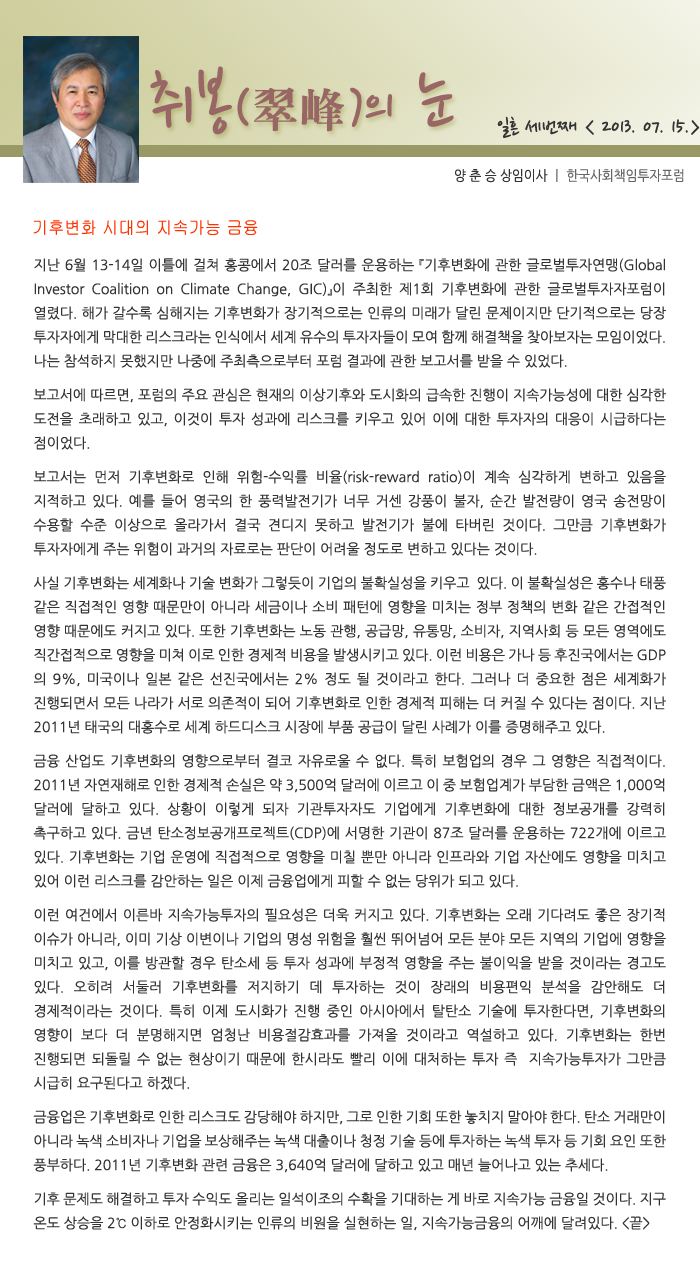
<style>
.page{position:relative;width:700px;height:1276px;background:#ffffff}
.page>*{position:absolute;margin:0}
.t1{font:77.5px "NanumPen";color:#996666}
.t2{font:60px "NanumPen";color:#996666}
.t3{font:48px "H2mjrE";color:#996666}
.t4{font:24px "NanumPen";color:#333333}
.t5{font:14px "NanumGothic";color:#666666;scale:0.9 1}
.t6{font:14px "NanumGothic";color:#333333;scale:0.9 1}
.t7{font:18px "Gulim";color:#ff3300;scale:0.9 1}
.t8{font:14px/24px "NanumGothic";color:#333333}
.t9{font:14px/10px "NanumGothic";color:#333333}
</style>
<div class="page">
<p class="t1" style="left:150px;top:66px;width:304px;height:69px">취봉<span class="t2">(</span><span class="t3">翠峰</span><span class="t2">)</span><span class="t2">의</span> 눈</p>
<p class="t4" style="left:497px;top:116px;width:203px;height:22px">일흔 세번째 &lt; 2013. 07. 15.&gt;</p>
<p class="t5" style="left:455px;top:169px;width:229px;height:14px"><span class="t6">양 춘 승 상임이사 </span>ㅣ 한국사회책임투자포럼</p>
<p class="t7" style="left:33px;top:220px;width:225px;height:15px">기후변화 시대의 지속가능 금융</p>
<p class="t8" style="left:33px;top:258px;width:633px;height:973px;text-align:justify">지난 6월 13-14일 이틀에 걸쳐 홍콩에서 20조 달러를 운용하는 『기후변화에 관한 글로벌투자연맹(Global Investor Coalition on Climate Change, GIC)』이 주최한 제1회 기후변화에 관한 글로벌투자자포럼이 열렸다. 해가 갈수록 심해지는 기후변화가 장기적으로는 인류의 미래가 달린 문제이지만 단기적으로는 당장 투자자에게 막대한 리스크라는 인식에서 세계 유수의 투자자들이 모여 함께 해결책을 찾아보자는 모임이었다. 나는 참석하지 못했지만 나중에 주최측으로부터 포럼 결과에 관한 보<span class="t9">고서를 받을 수 있었다. <br><br>보고서에 따르면, 포럼의 주요 관심은 현재의 이상기후와 도시화의 급속한 </span>진행이 지속가능성에 대한 심각한 도전을 초래하고 있고, 이것이 투자 성과에 리스크를 키우고 있어 이에 대한 투자자의 대응이 시급하다는 점이<span class="t9">었다.<br><br>보고서는</span> 먼저 기후변화로 인해 위험-수익률 비율(risk-reward ratio)이 계속 심각하게 변하고 있음을 지적하고 있다. 예를 들어 영국의 한 풍력발전기가 너무 거센 강풍이 불자, 순간 발전량이 영국 송전망이 수용할 수준 이상으로 올라가서 결국 견디지 못하고 발전기가 불에 타버린 것이다. 그만큼 기후변화가 투자자에게 주는 위험이 과거의 자료<span class="t9">로는 판단이 어려울 정도로 변하고 있다는 것이다.<br><br>사실 기후변화는 세계화나 기술 변화가 그렇듯이</span> 기업의 불확실성을 키우고  있다. 이 불확실성은 홍수나 태풍 같은 직접적인 영향 때문만이 아니라 세금이나 소비 패턴에 영향을 미치는 정부 정책의 변화 같은 간접적인 영향 때문에도 커지고 있다. 또한 기후변화는 노동 관행, 공급망, 유통망, 소비자, 지역사회 등 모든 영역에도 직간접적으로 영향을 미쳐 이로 인한 경제적 비용을 발생시키고 있다. 이런 비용은 가나 등 후진국에서는 GDP의 9%, 미국이나 일본 같은 선진국에서는 2% 정도 될 것이라고 한다. 그러나 더 중요한 점은 세계화가 진행되면서 모든 나라가 서로 의존적이 되어 기후변화로 인한 경제적 피해는 더 커질 수 있다는 점이다. 지난 2011년 태국의 대홍수로 세계 하드디스크 시장에 부품 공<span class="t9">급이 달린 사례가 이를 증명해주고 있다.<br><br>금융 산업도 기후변화의 영향으로부터 결코 자유로울 수 없다. 특히 보</span>험업의 경우 그 영향은 직접적이다. 2011년 자연재해로 인한 경제적 손실은 약 3,500억 달러에 이르고 이 중 보험업계가 부담한 금액은 1,000억 달러에 달하고 있다. 상황이 이렇게 되자 기관투자자도 기업에게 기후변화에 대한 정보공개를 강력히 촉구하고 있다. 금년 탄소정보공개프로젝트(CDP)에 서명한 기관이 87조 달러를 운용하는 722개에 이르고 있다. 기후변화는 기업 운영에 직접적으로 영향을 미칠 뿐만 아니라 인프라와 기업 자산에도 영향을 미치고 있어 이런 리스크를 감안하는 일은 이제 금융업에게 피할 <span class="t9">수 없는 당위가 되고 있다.<br><br>이런 여건에서 이른바 지속가능투자의 필요성은 더욱 커지고 있다. </span>기후변화는 오래 기다려도 좋은 장기적 이슈가 아니라, 이미 기상 이변이나 기업의 명성 위험을 훨씬 뛰어넘어 모든 분야 모든 지역의 기업에 영향을 미치고 있고, 이를 방관할 경우 탄소세 등 투자 성과에 부정적 영향을 주는 불이익을 받을 것이라는 경고도 있다. 오히려 서둘러 기후변화를 저지하기 데 투자하는 것이 장래의 비용편익 분석을 감안해도 더 경제적이라는 것이다. 특히 이제 도시화가 진행 중인 아시아에서 탈탄소 기술에 투자한다면, 기후변화의 영향이 보다 더 분명해지면 엄청난 비용절감효과를 가져올 것이라고 역설하고 있다. 기후변화는 한번 진행되면 되돌릴 수 없는 현상이기 때문에 한시라도 빨리 이에 대처하는 투자 즉  지속가능투자가 그만큼 시급히 요구된다<span class="t9">고 하겠다.<br><br>금융업은 기후변화로 인한 리스</span>크도 감당해야 하지만, 그로 인한 기회 또한 놓치지 말아야 한다. 탄소 거래만이 아니라 녹색 소비자나 기업을 보상해주는 녹색 대출이나 청정 기술 등에 투자하는 녹색 투자 등 기회 요인 또한 풍부하다. 2011년 기후변화 관련 금융은 3,640억 달러에 달하고 있고 매년 늘어<span class="t9">나고 있는 추세다.<br><br>기후 문제도 해결하고 투자 수익도 올리는 일석이조의 수확을 기대하는 게 바로 지속가능 </span>금융일 것이다. 지구 온도 상승을 2℃ 이하로 안정화시키는 인류의 비원을 실현하는 일, 지속가능금융의 어깨에 달려있다. &lt;끝&gt;</p>
</div>
